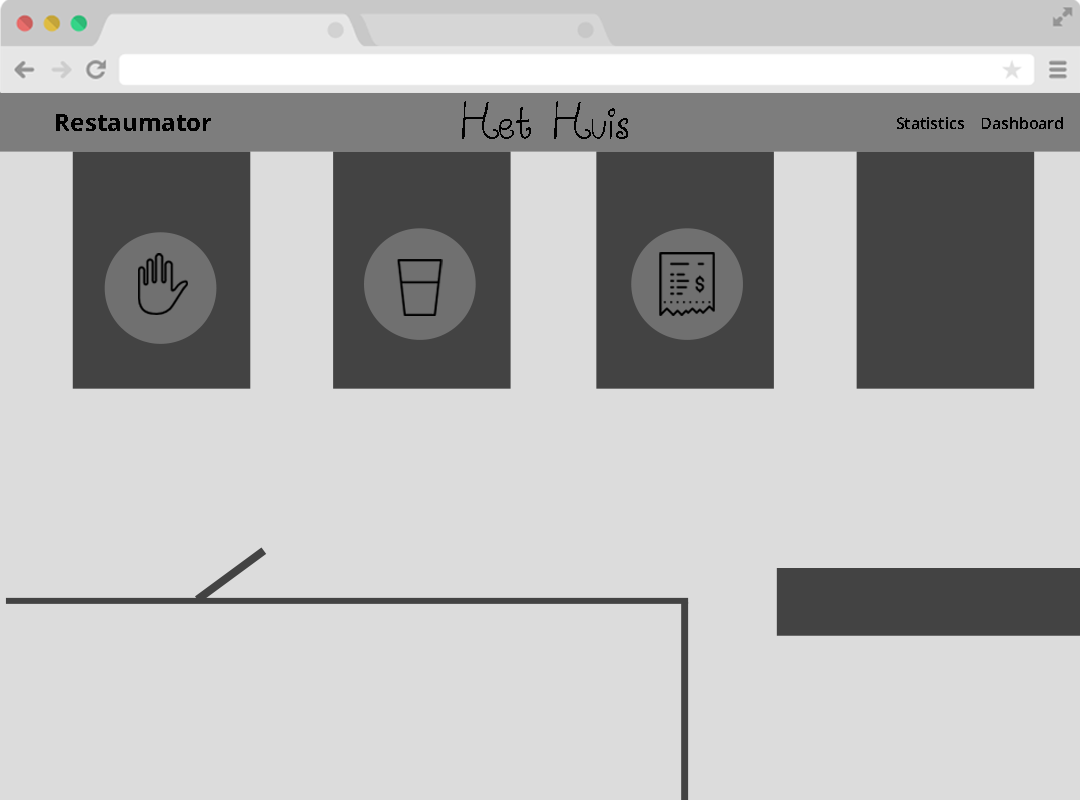
<style>
.page{position:relative;width:1080px;height:800px;background:#dcdcdc}
.page>*{position:absolute;margin:0}
.t1{font:40px "AirplanesintheNightSky";letter-spacing:0.005em;color:#000000}
.t2{font:23.9px "OpenSans-Bold";letter-spacing:0.005em;color:#000000}
.t3{font:15.8px "OpenSans-Semibold";letter-spacing:0.005em;color:#000000}
</style>
<div class="page">
<p class="t1" style="left:462px;top:101px;width:166px;height:38px">Het Huis</p>
<p class="t2" style="left:56px;top:114px;width:155px;height:17px">Restaumator</p>
<p class="t3" style="left:897px;top:117px;width:67px;height:12px">Statistics</p>
<p class="t3" style="left:982px;top:117px;width:81px;height:12px">Dashboard</p>
</div>
